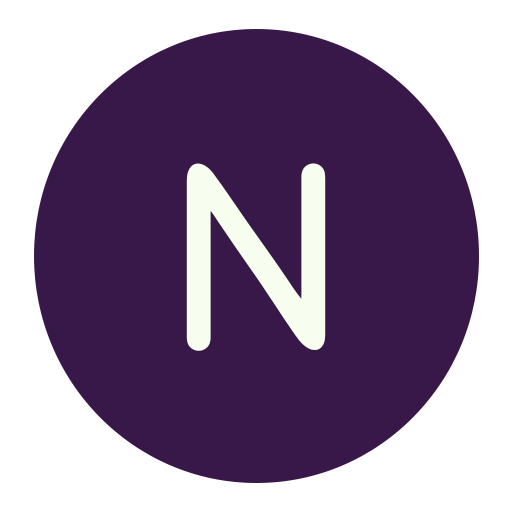
<style>
.page{position:relative;width:512px;height:512px;background:#381749}
.page>*{position:absolute;margin:0}
.t1{font:266.9px "TiltNeon-Regular";color:#ffffff}
</style>
<div class="page">
<p class="t1" style="left:186px;top:163px;width:140px;height:188px">N</p>
</div>
